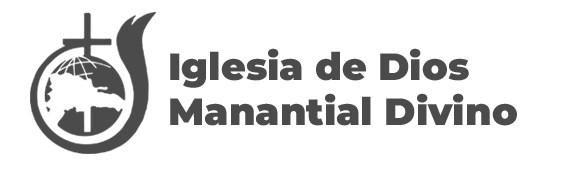
<style>
.page{position:relative;width:567px;height:170px;background:#ffffff}
.page>*{position:absolute;margin:0}
.t1{font:38px "Montserrat-Black";color:#4b4b4b}
</style>
<div class="page">
<p class="t1" style="left:170px;top:48px;width:299px;height:40px">Iglesia de Dios</p>
<p class="t1" style="left:170px;top:93px;width:347px;height:33px">Manantial Divino</p>
</div>
